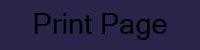
<style>
.page{position:relative;width:200px;height:50px;background:#28244a}
.page>*{position:absolute;margin:0}
.t1{font:28.9px "MicrosoftSansSerif";color:#000000}
</style>
<div class="page">
<p class="t1" style="left:34px;top:13px;width:133px;height:27px">Print Page</p>
</div>
